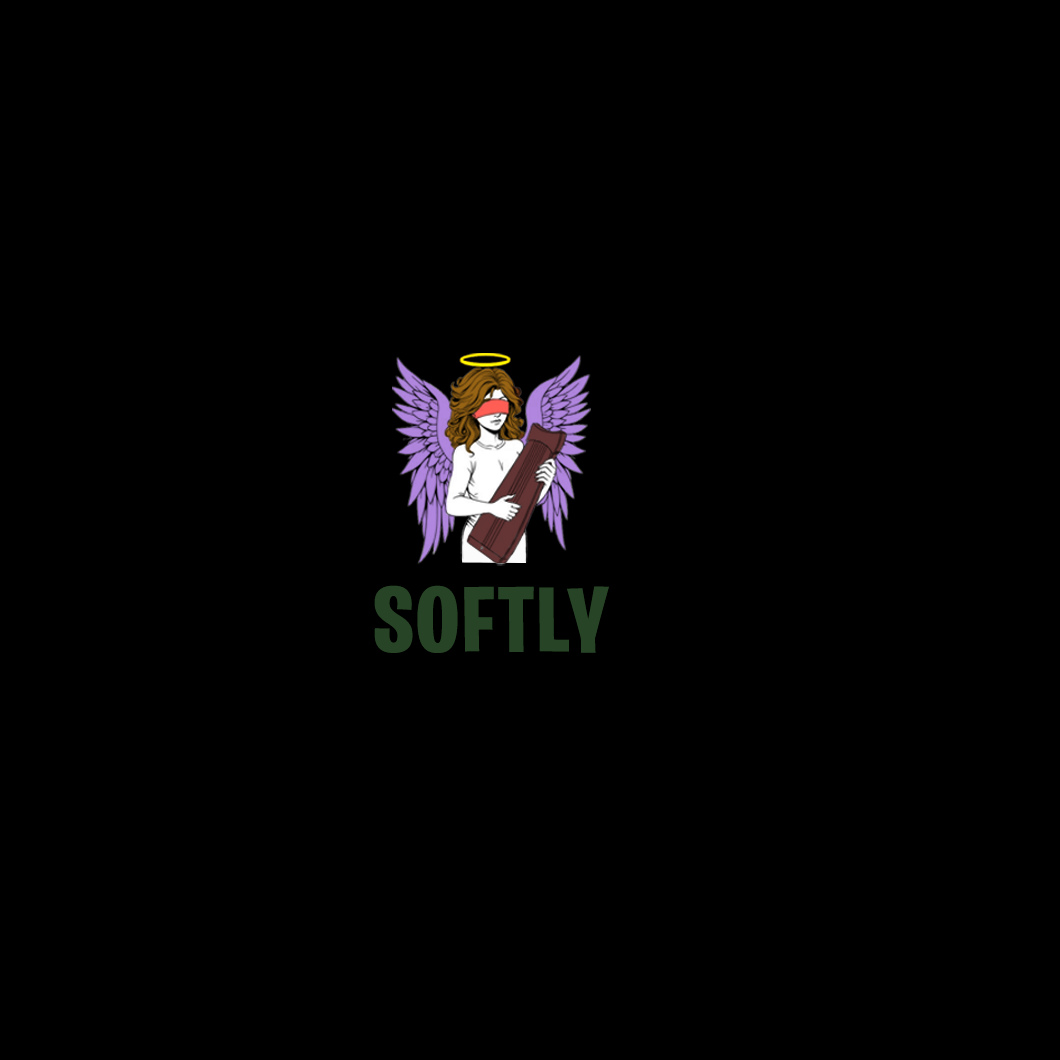
<style>
.page{position:relative;width:1060px;height:1060px;background:#000000}
.page>*{position:absolute;margin:0}
.t1{font:92.7px "BurbankBigCondensed-Bold";letter-spacing:0.025em;color:#284426;scale:1.11 1}
</style>
<div class="page">
<p class="t1" style="left:374px;top:585px;width:235px;height:68px">SOFTLY</p>
</div>
